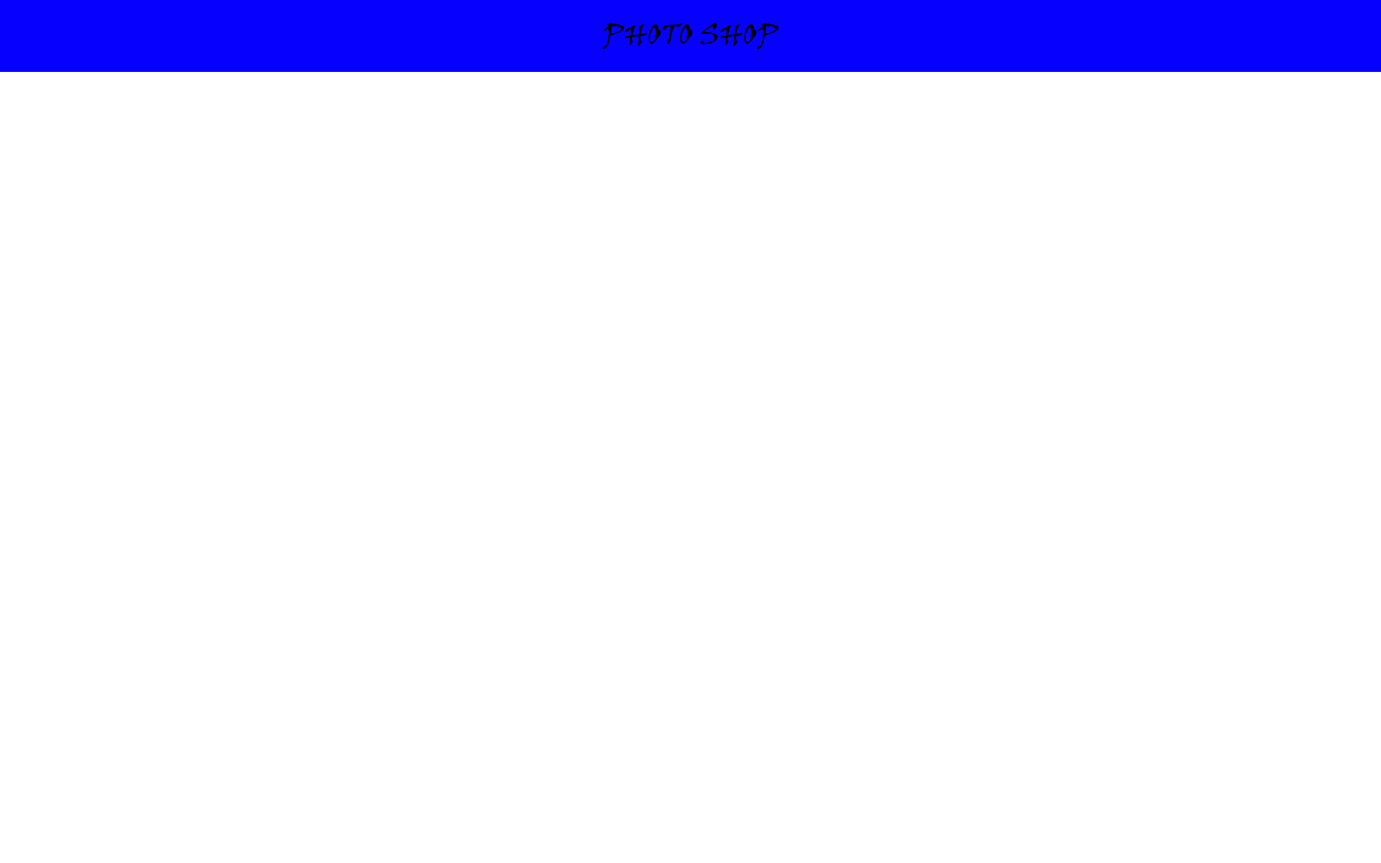
<style>
.page{position:relative;width:1381px;height:863px;background:#ffffff}
.page>*{position:absolute;margin:0}
.t1{font:28.8px "VinerHandITC";color:#000000}
</style>
<div class="page">
<p class="t1" style="left:602px;top:22px;width:177px;height:28px">PHOTO SHOP</p>
</div>
